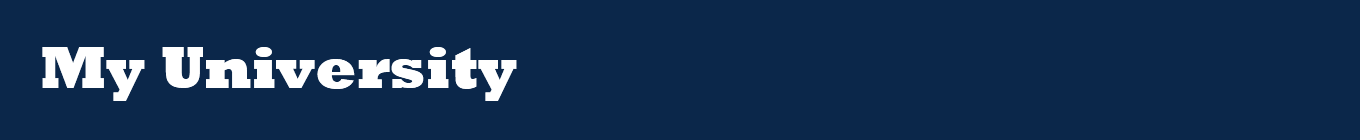
<style>
.page{position:relative;width:1360px;height:140px;background:#0b274a}
.page>*{position:absolute;margin:0}
.t1{font:60px "Rockwell-ExtraBold";color:#ffffff}
</style>
<div class="page">
<p class="t1" style="left:42px;top:47px;width:475px;height:54px">My University</p>
</div>
